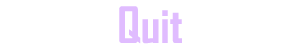
<style>
.page{position:relative;width:300px;height:50px;background:#ffffff}
.page>*{position:absolute;margin:0}
.t1{font:48px "AgencyFB-Bold";color:#e0bcff}
</style>
<div class="page">
<p class="t1" style="left:119px;top:6px;width:63px;height:38px">Quit</p>
</div>
